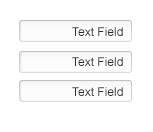
<style>
.page{position:relative;width:153px;height:132px;background:#ffffff}
.page>*{position:absolute;margin:0}
.t1{font:12px "ArialMT";color:#2e2e2e}
</style>
<div class="page">
<p class="t1" style="left:72px;top:27px;width:51px;height:9px">Text Field</p>
<p class="t1" style="left:72px;top:57px;width:51px;height:9px">Text Field</p>
<p class="t1" style="left:72px;top:87px;width:51px;height:9px">Text Field</p>
</div>
